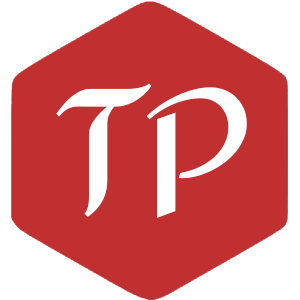
<style>
.page{position:relative;width:300px;height:300px;background:#c13030}
.page>*{position:absolute;margin:0}
.t1{font:180px "Redressed";color:#ffffff}
</style>
<div class="page">
<p class="t1" style="left:56px;top:83px;width:191px;height:135px">TP</p>
</div>
